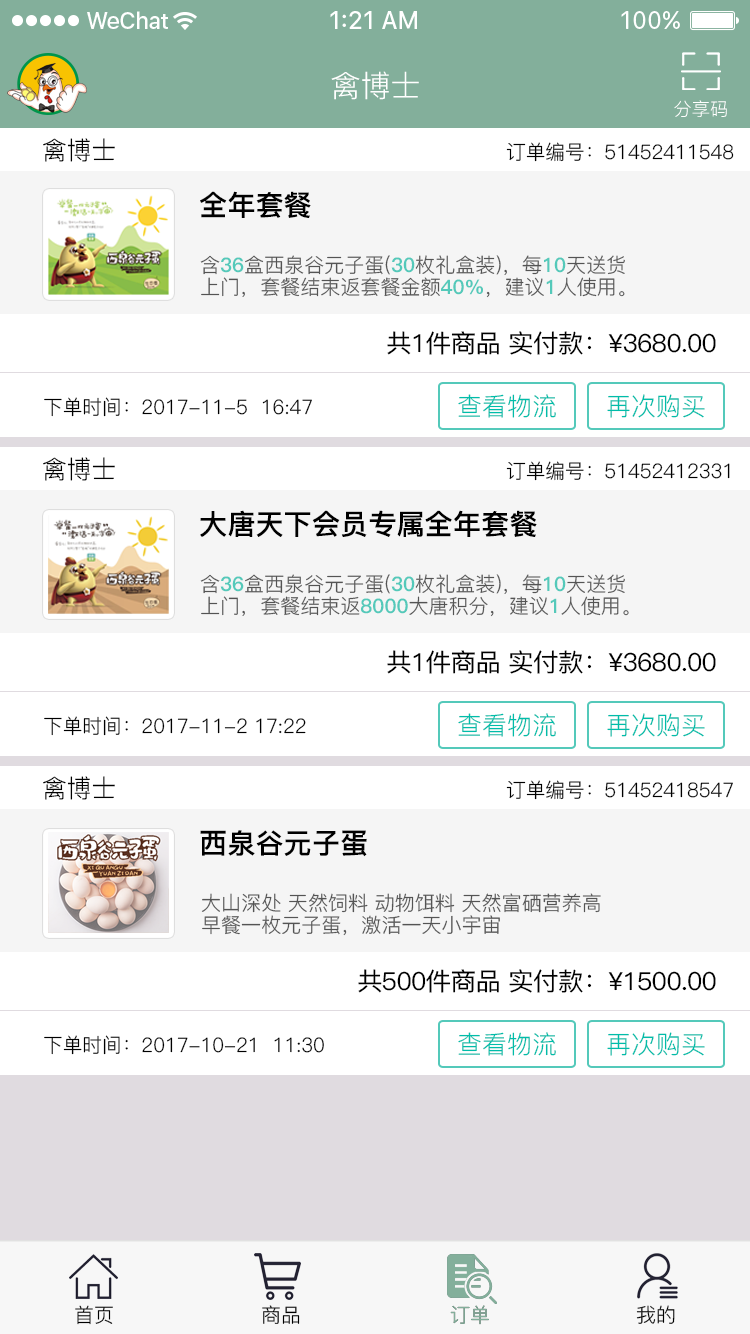
<style>
.page{position:relative;width:750px;height:1334px;background:#ffffff}
.page>*{position:absolute;margin:0}
.t1{font:30px "PingFang-SC-Regular";color:#ffffff;text-transform:uppercase}
.t2{font:18.3px "PingFang-SC-Regular";color:#ffffff;text-transform:uppercase}
.t3{font:25.1px "PingFang-SC-Regular";color:#000000}
.t4{font:20px "PingFang-SC-Regular";color:#000000}
.t5{font:28.1px "PingFang-SC-Heavy";color:#000000}
.t6{font:20px/21.8px "PingFang-SC-Regular"}
.t7{font:20px/21.8px "PingFang-SC-Heavy"}
.t8{font:25px "PingFang-SC-Medium";letter-spacing:-0.03em;color:#000000}
.t9{font:25px "PingFang-SC-Regular";color:#00bdaa}
.t10{font:20px/21.8px "PingFang-SC-Regular";color:#545454}
.t11{font:20px "PingFang-SC-Regular";color:#000000;text-transform:uppercase}
.t12{font:20px "PingFang-SC-Regular";color:#83af9b;text-transform:uppercase}
</style>
<div class="page">
<p class="t1" style="left:331px;top:71px;width:88px;height:29px">禽博士</p>
<p class="t2" style="left:674px;top:100px;width:53px;height:17px">分享码</p>
<p class="t3" style="left:43px;top:138px;width:72px;height:24px">禽博士</p>
<p class="t4" style="left:506px;top:142px;width:228px;height:20px">订单编号：51452411548</p>
<p class="t5" style="left:200px;top:191px;width:111px;height:27px">全年套餐</p>
<p class="t6" style="left:200px;top:255px;width:425px;height:43px">含<span class="t7">36</span>盒西泉谷元子蛋(<span class="t7">30</span>枚礼盒装)，每<span class="t7">10</span>天送货<br>上门，套餐结束返套餐金额<span class="t7">40%</span>，建议<span class="t7">1</span>人使用。</p>
<p class="t8" style="left:387px;top:331px;width:329px;height:24px">共1件商品 实付款：¥3680.00</p>
<p class="t4" style="left:44px;top:397px;width:268px;height:20px">下单时间：2017-11-5  16:47</p>
<p class="t9" style="left:458px;top:394px;width:98px;height:24px">查看物流</p>
<p class="t9" style="left:607px;top:394px;width:98px;height:24px">再次购买</p>
<p class="t3" style="left:43px;top:457px;width:72px;height:24px">禽博士</p>
<p class="t4" style="left:506px;top:461px;width:224px;height:20px">订单编号：51452412331</p>
<p class="t5" style="left:200px;top:510px;width:337px;height:27px">大唐天下会员专属全年套餐</p>
<p class="t6" style="left:200px;top:574px;width:429px;height:43px">含<span class="t7">36</span>盒西泉谷元子蛋(<span class="t7">30</span>枚礼盒装)，每<span class="t7">10</span>天送货<br>上门，套餐结束返<span class="t7">8000</span>大唐积分，建议<span class="t7">1</span>人使用。</p>
<p class="t8" style="left:387px;top:650px;width:329px;height:24px">共1件商品 实付款：¥3680.00</p>
<p class="t9" style="left:458px;top:713px;width:98px;height:24px">查看物流</p>
<p class="t9" style="left:607px;top:713px;width:98px;height:24px">再次购买</p>
<p class="t4" style="left:44px;top:716px;width:262px;height:20px">下单时间：2017-11-2 17:22</p>
<p class="t3" style="left:43px;top:776px;width:72px;height:24px">禽博士</p>
<p class="t4" style="left:506px;top:780px;width:227px;height:20px">订单编号：51452418547</p>
<p class="t5" style="left:200px;top:830px;width:167px;height:27px">西泉谷元子蛋</p>
<p class="t10" style="left:201px;top:893px;width:400px;height:43px">大山深处 天然饲料 动物饵料 天然富硒营养高<br>早餐一枚元子蛋，激活一天小宇宙</p>
<p class="t8" style="left:358px;top:969px;width:358px;height:24px">共500件商品 实付款：¥1500.00</p>
<p class="t4" style="left:44px;top:1035px;width:280px;height:20px">下单时间：2017-10-21  11:30</p>
<p class="t9" style="left:458px;top:1032px;width:98px;height:24px">查看物流</p>
<p class="t9" style="left:607px;top:1032px;width:98px;height:24px">再次购买</p>
<p class="t11" style="left:75px;top:1305px;width:38px;height:20px">首页</p>
<p class="t11" style="left:262px;top:1305px;width:38px;height:19px">商品</p>
<p class="t12" style="left:450px;top:1305px;width:39px;height:20px">订单</p>
<p class="t12" style="left:450px;top:1305px;width:39px;height:20px">订单</p>
<p class="t11" style="left:636px;top:1305px;width:39px;height:19px">我的</p>
</div>
